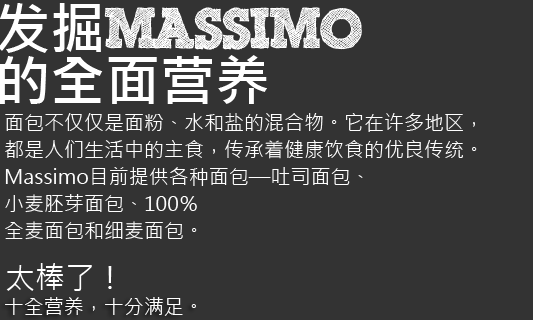
<style>
.page{position:relative;width:533px;height:320px;background:#333333}
.page>*{position:absolute;margin:0}
.t1{font:55px/52px "ScribbleBoxDEMO";color:#ffffff}
.t2{font:55px/52px "MicrosoftJhengHeiUIBold";color:#ffffff}
.t3{font:55px/52px "MicrosoftJhengHeiBold";color:#ffffff}
.t4{font:20px/27px "MicrosoftJhengHeiRegular";color:#ffffff}
.t5{font:30px "MicrosoftJhengHeiRegular";color:#ffffff}
.t6{font:20px "MicrosoftJhengHeiRegular";color:#ffffff}
</style>
<div class="page">
<p class="t1" style="left:0px;top:3px;width:362px;height:101px"><span class="t2">发掘</span>Massimo<br><span class="t3">的全面营养</span></p>
<p class="t4" style="left:5px;top:113px;width:472px;height:127px">面包不仅仅是面粉、水和盐的混合物。它在许多地区，<br>都是人们生活中的主食，传承着健康饮食的优良传统。<br>Massimo目前提供各种面包—吐司面包、<br>小麦胚芽面包、100％<br>全麦面包和细麦面包。</p>
<p class="t5" style="left:6px;top:263px;width:106px;height:28px">太棒了！</p>
<p class="t6" style="left:5px;top:297px;width:191px;height:19px">十全营养，十分满足。</p>
</div>
